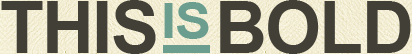
<style>
.page{position:relative;width:412px;height:54px;background:#413f36}
.page>*{position:absolute;margin:0}
.t1{font:72px "Arial-BoldMT";letter-spacing:-0.025em;color:#413f36}
.t2{font:48.6px "Arial-BoldMT";letter-spacing:-0.025em;color:#6b9e8e;scale:1.11 1}
</style>
<div class="page">
<p class="t1" style="left:1px;top:0px;width:155px;height:54px">THIS</p>
<p class="t2" style="left:164px;top:2px;width:45px;height:37px">IS</p>
<p class="t1" style="left:220px;top:0px;width:191px;height:54px">BOLD</p>
</div>
